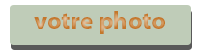
<style>
.page{position:relative;width:200px;height:50px;background:#bfccb8}
.page>*{position:absolute;margin:0}
.t1{font:25px "MyriadPro-Bold"}
</style>
<div class="page">
<p class="t1" style="left:34px;top:11px;width:131px;height:23px">votre photo</p>
</div>
